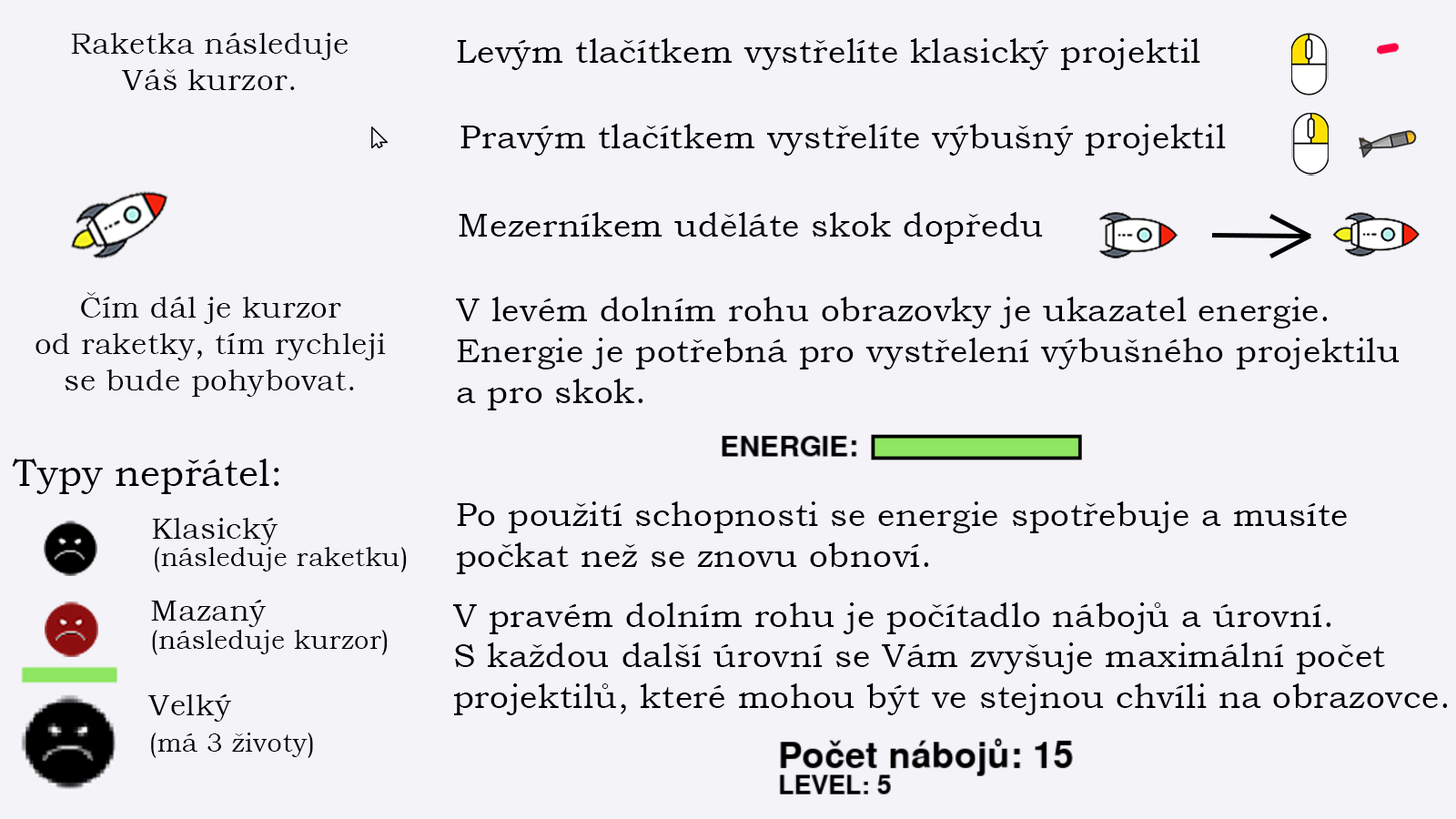
<style>
.page{position:relative;width:1456px;height:819px;background:#f3f3f8}
.page>*{position:absolute;margin:0}
.t1{font:30.3px "BookmanOldStyle";letter-spacing:0.01em;color:#000000}
.t2{font:34.1px "BookmanOldStyle";letter-spacing:0.01em;color:#000000}
.t3{font:37.9px "BookmanOldStyle";letter-spacing:0.01em;color:#000000}
.t4{font:26.5px "BookmanOldStyle";letter-spacing:0.01em;color:#000000}
</style>
<div class="page">
<p class="t1" style="left:71px;top:33px;width:277px;height:57px;text-align:center">Raketka následuje<br>Váš kurzor.</p>
<p class="t2" style="left:457px;top:38px;width:743px;height:32px">Levým tlačítkem vystřelíte klasický projektil</p>
<p class="t2" style="left:460px;top:124px;width:766px;height:32px">Pravým tlačítkem vystřelíte výbušný projektil</p>
<p class="t2" style="left:459px;top:212px;width:584px;height:32px">Mezerníkem uděláte skok dopředu</p>
<p class="t1" style="left:35px;top:292px;width:351px;height:105px;text-align:center">Čím dál je kurzor<br>od raketky, tím rychleji<br>se bude pohybovat.</p>
<p class="t2" style="left:456px;top:297px;width:944px;height:277px">V levém dolním rohu obrazovky je ukazatel energie.<br>Energie je potřebná pro vystřelení výbušného projektilu <br>a pro skok.<br><br><br>Po použití schopnosti se energie spotřebuje a musíte <br>počkat než se znovu obnoví.</p>
<p class="t3" style="left:12px;top:459px;width:267px;height:35px">Typy nepřátel:</p>
<p class="t1" style="left:152px;top:518px;width:126px;height:27px">Klasický</p>
<p class="t4" style="left:155px;top:547px;width:252px;height:25px">(následuje raketku)</p>
<p class="t1" style="left:151px;top:600px;width:115px;height:27px">Mazaný</p>
<p class="t2" style="left:453px;top:602px;width:995px;height:113px">V pravém dolním rohu je počítadlo nábojů a úrovní.<br>S každou další úrovní se Vám zvyšuje maximální počet <br>projektilů, které mohou být ve stejnou chvíli na obrazovce.</p>
<p class="t4" style="left:152px;top:630px;width:236px;height:25px">(následuje kurzor)</p>
<p class="t1" style="left:148px;top:694px;width:83px;height:28px">Velký</p>
<p class="t4" style="left:151px;top:733px;width:162px;height:25px">(má 3 životy)</p>
</div>
